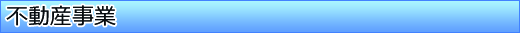
<style>
.page{position:relative;width:520px;height:33px}
.page>*{position:absolute;margin:0}
.t1{font:22px "Meiryo";color:#070b0e}
</style>
<div class="page">
<p class="t1" style="left:6px;top:5px;width:110px;height:21px">不動産事業</p>
</div>
